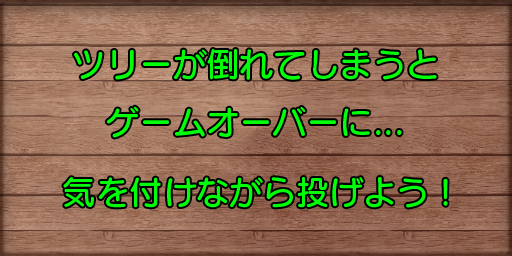
<style>
.page{position:relative;width:512px;height:256px}
.page>*{position:absolute;margin:0}
.t1{font:33.3px "SeuratProN-DB";color:#00ff08}
</style>
<div class="page">
<p class="t1" style="left:74px;top:49px;width:363px;height:89px">ツリーが倒れてしまうと<br>　ゲームオーバーに...</p>
<p class="t1" style="left:63px;top:177px;width:385px;height:31px">気を付けながら投げよう！</p>
</div>
